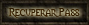
<style>
.page{position:relative;width:89px;height:25px}
.page>*{position:absolute;margin:0}
.t1{font:11px "Morpheus";color:#341f02}
</style>
<div class="page">
<p class="t1" style="left:8px;top:8px;width:72px;height:10px">Recuperar Pass</p>
</div>
